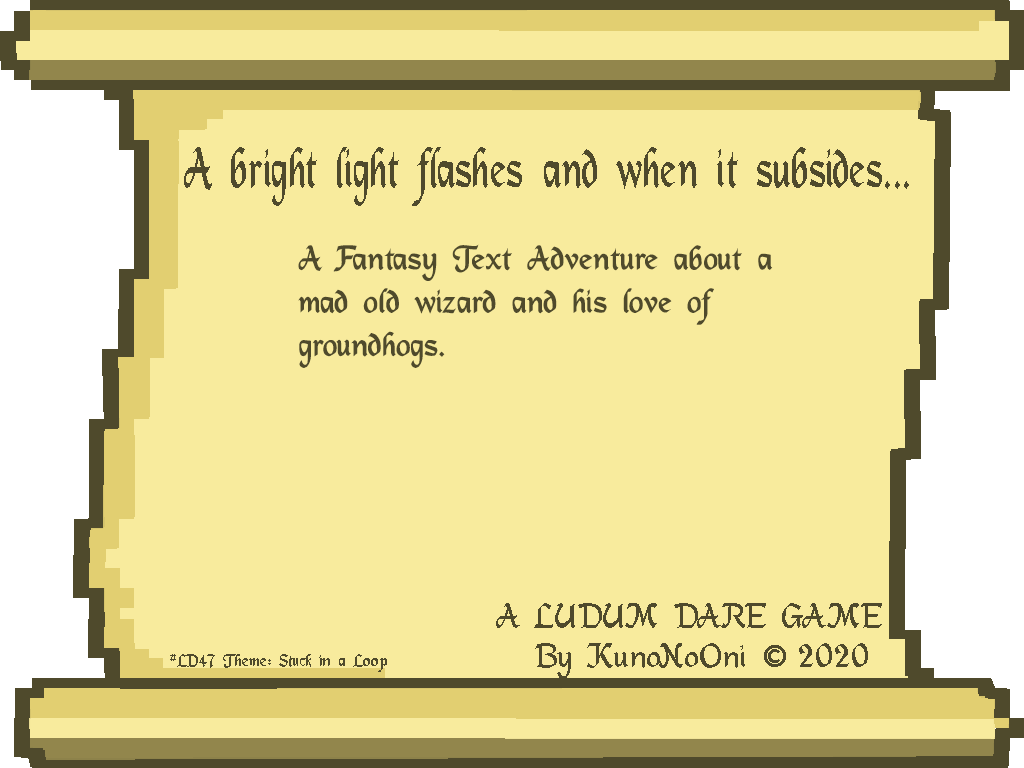
<style>
.page{position:relative;width:1024px;height:768px;background:#f8eb9d}
.page>*{position:absolute;margin:0}
.t1{font:60.8px "DS_Mysticora";color:#4f4a2c;scale:0.72 1}
.t2{font:36px "DS_Mysticora";color:#4f4a2c}
.t3{font:18px "DS_Mysticora";color:#4f4a2c}
</style>
<div class="page">
<p class="t1" style="left:184px;top:147px;width:725px;height:59px">A bright light flashes and when it subsides...</p>
<p class="t2" style="left:298px;top:244px;width:475px;height:124px">A Fantasy Text Adventure about a <br>mad old wizard and his love of <br>groundhogs.</p>
<p class="t2" style="left:496px;top:603px;width:386px;height:25px">A LUDUM DARE GAME</p>
<p class="t3" style="left:170px;top:654px;width:217px;height:18px">#LD47 Theme: Stuck in a Loop</p>
<p class="t2" style="left:535px;top:643px;width:333px;height:36px">By KunoNoOni ©2020</p>
</div>
